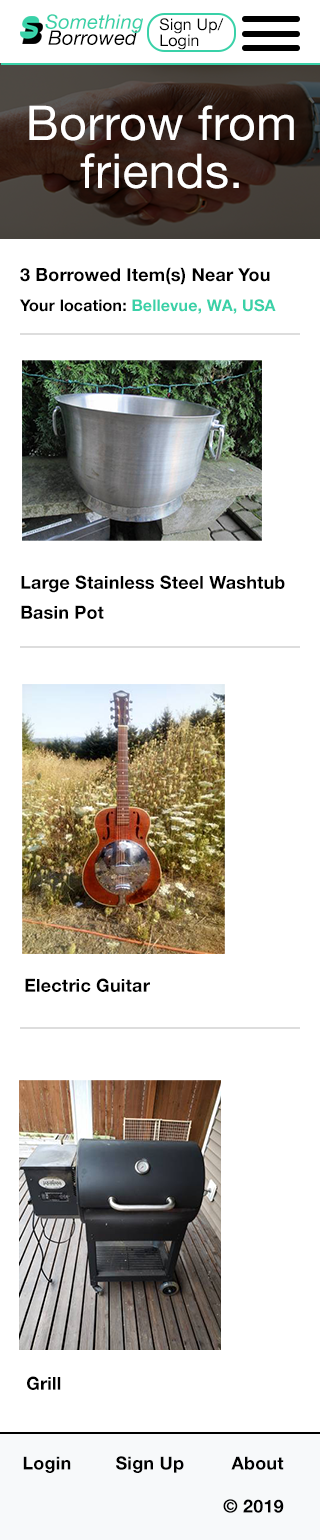
<style>
.page{position:relative;width:320px;height:1540px;background:#ffffff}
.page>*{position:absolute;margin:0}
.t1{font:20px "HelveticaNeue-Italic";letter-spacing:0.01em;color:#39d1a8}
.t2{font:20px "HelveticaNeue-Italic";letter-spacing:0.01em;color:#000000}
.t3{font:16px/16px "HelveticaNeue";letter-spacing:0.01em;color:#000000}
.t4{font:48px/48px "HelveticaNeue";letter-spacing:0.01em;color:#ffffff}
.t5{font:18px/30px "HelveticaNeue-Bold";letter-spacing:0.01em;color:#000000}
.t6{font:16px/30px "HelveticaNeue-Bold";letter-spacing:0.01em;color:#000000}
.t7{font:16px/30px "HelveticaNeue-Bold";letter-spacing:0.01em;color:#39d1a8}
.t8{font:18px "HelveticaNeue-Bold";letter-spacing:0.01em;color:#000000}
</style>
<div class="page">
<p class="t1" style="left:45px;top:14px;width:98px;height:19px">Something</p>
<p class="t2" style="left:48px;top:30px;width:89px;height:15px">Borrowed</p>
<p class="t3" style="left:159px;top:18px;width:65px;height:32px">Sign Up/<br>Login</p>
<p class="t4" style="left:29px;top:105px;width:265px;height:84px;text-align:center">Borrow from <br>friends.</p>
<p class="t5" style="left:19px;top:267px;width:257px;height:47px">3 Borrowed Item(s) Near You <br><span class="t6">Your location: </span><span class="t7">Bellevue, WA, USA</span></p>
<p class="t5" style="left:21px;top:575px;width:264px;height:44px">Large Stainless Steel Washtub Basin Pot</p>
<p class="t8" style="left:25px;top:978px;width:125px;height:14px">Electric Guitar</p>
<p class="t8" style="left:27px;top:1376px;width:34px;height:14px">Grill</p>
<p class="t8" style="left:23px;top:1456px;width:48px;height:17px">Login</p>
<p class="t8" style="left:116px;top:1456px;width:68px;height:17px">Sign Up</p>
<p class="t8" style="left:231px;top:1456px;width:53px;height:14px">About</p>
<p class="t8" style="left:223px;top:1499px;width:61px;height:14px">© 2019</p>
</div>
